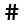
<style>
.page{position:relative;width:24px;height:24px;background:#ffffff}
.page>*{position:absolute;margin:0}
.t1{font:25px "Consolas";color:#000000}
</style>
<div class="page">
<p class="t1" style="left:5px;top:4px;width:14px;height:16px">#</p>
</div>
